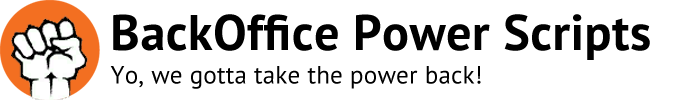
<style>
.page{position:relative;width:700px;height:100px;background:#ffffff}
.page>*{position:absolute;margin:0}
.t1{font:50px "PTSans-Bold";letter-spacing:0.01em;color:#000000}
.t2{font:25px "PTSans-Regular";letter-spacing:0.01em;color:#000000}
</style>
<div class="page">
<p class="t1" style="left:113px;top:14px;width:537px;height:46px">BackOffice Power Scripts</p>
<p class="t2" style="left:110px;top:66px;width:371px;height:23px">Yo, we gotta take the power back!</p>
</div>
